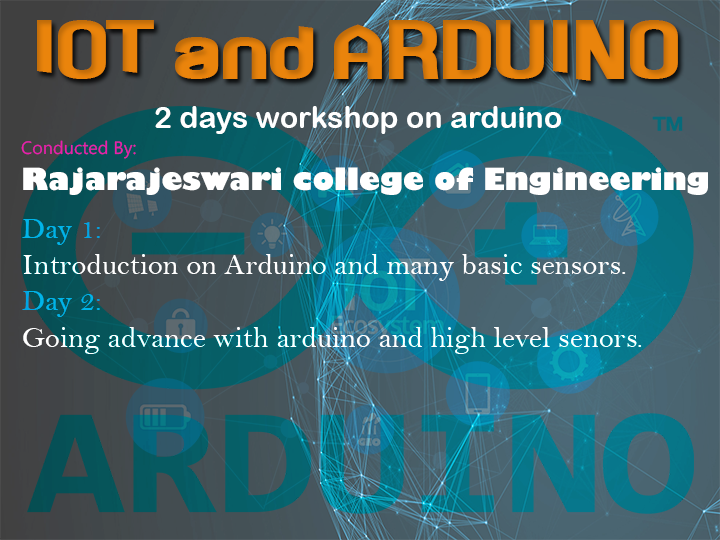
<style>
.page{position:relative;width:720px;height:540px}
.page>*{position:absolute;margin:0}
.t1{font:85.1px "Technoma";color:#ea840c;scale:1.15 1}
.t2{font:30.2px "ArialRoundedMTBold";color:#ffffff}
.t3{font:30px "GillSans-UltraBold";color:#ffffff}
.t4{font:18px "NirmalaUI";color:#eb1dae}
.t5{font:30.2px "BellMT";color:#ffffff}
.t6{font:30.2px "BellMT";color:#00a5e4}
</style>
<div class="page">
<p class="t1" style="left:37px;top:20px;width:641px;height:61px">IOT and ARDUINO</p>
<p class="t2" style="left:155px;top:106px;width:406px;height:28px">2 days workshop on arduino</p>
<p class="t3" style="left:21px;top:140px;width:687px;height:55px"><span class="t4">Conducted By:<br></span>Rajarajeswari college of Engineering</p>
<p class="t5" style="left:22px;top:219px;width:620px;height:135px"><span class="t6">Day 1:<br></span>Introduction on Arduino and many basic sensors.<br><span class="t6">Day 2:<br></span>Going advance with arduino and high level senors.</p>
</div>
